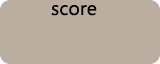
<style>
.page{position:relative;width:160px;height:64px;background:#bbada0}
.page>*{position:absolute;margin:0}
.t1{font:18px "MicrosoftYaHei";color:#000000}
</style>
<div class="page">
<p class="t1" style="left:51px;top:5px;width:46px;height:11px">score</p>
</div>
